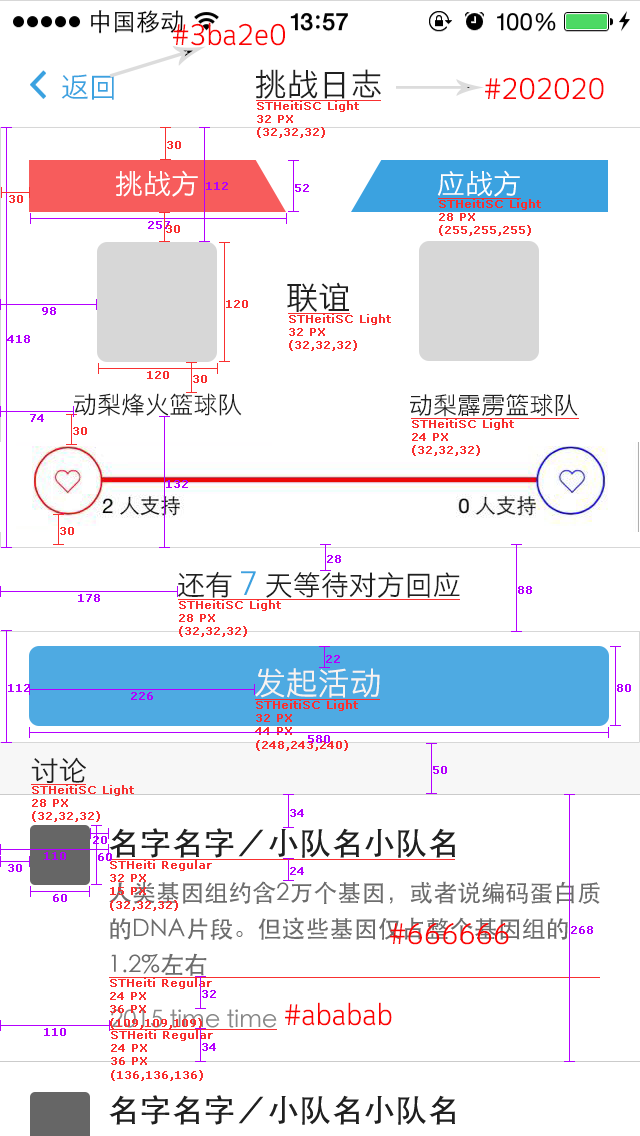
<style>
.page{position:relative;width:640px;height:1136px;background:#ffffff}
.page>*{position:absolute;margin:0}
.t1{font:28px "STHeitiSC-Light";color:#fb0404}
.t2{font:28px "STHeitiSC-Light";color:#3ba2e0}
.t3{font:32px "STHeitiSC-Light";color:#202020}
.t4{font:11px "Verdana";color:#f83030;font-weight:bold}
.t5{font:28px "STHeitiSC-Light";color:#ffffff}
.t6{font:11px "Verdana";color:#b400ff;font-weight:bold}
.t7{font:24px "STHeitiSC-Light";color:#202020}
.t8{font:28px "STHeitiSC-Light";color:#202020}
.t9{font:32px "STHeitiSC-Light";color:#3ba2e0}
.t10{font:32px "STHeitiSC-Light";color:#f8f3f0}
.t11{font:32px "STHeiti";color:#202020}
.t12{font:24px/36px "STHeiti";color:#6d6d6d}
.t13{font:24px "STHeiti";color:#888888}
</style>
<div class="page">
<p class="t1" style="left:173px;top:22px;width:112px;height:24px">#3ba2e0</p>
<p class="t2" style="left:61px;top:74px;width:53px;height:26px">返回</p>
<p class="t3" style="left:256px;top:69px;width:125px;height:30px">挑战日志</p>
<p class="t1" style="left:485px;top:77px;width:119px;height:23px">#202020</p>
<p class="t4" style="left:257px;top:101px;width:102px;height:37px">STHeitiSC Light<br>32 PX<br>(32,32,32)</p>
<p class="t4" style="left:167px;top:141px;width:14px;height:8px">30</p>
<p class="t5" style="left:116px;top:170px;width:82px;height:27px">挑战方</p>
<p class="t5" style="left:437px;top:170px;width:83px;height:27px">应战方</p>
<p class="t6" style="left:206px;top:182px;width:22px;height:8px">112</p>
<p class="t6" style="left:295px;top:184px;width:14px;height:8px">52</p>
<p class="t4" style="left:9px;top:195px;width:14px;height:8px">30</p>
<p class="t4" style="left:439px;top:199px;width:102px;height:37px">STHeitiSC Light<br>28 PX<br>(255,255,255)</p>
<p class="t6" style="left:148px;top:221px;width:22px;height:8px">257</p>
<p class="t4" style="left:166px;top:225px;width:14px;height:8px">30</p>
<p class="t3" style="left:287px;top:282px;width:62px;height:30px">联谊</p>
<p class="t4" style="left:226px;top:300px;width:22px;height:8px">120</p>
<p class="t6" style="left:42px;top:307px;width:14px;height:8px">98</p>
<p class="t4" style="left:289px;top:314px;width:102px;height:37px">STHeitiSC Light<br>32 PX<br>(32,32,32)</p>
<p class="t6" style="left:7px;top:335px;width:23px;height:8px">418</p>
<p class="t4" style="left:147px;top:371px;width:22px;height:8px">120</p>
<p class="t4" style="left:193px;top:375px;width:14px;height:8px">30</p>
<p class="t7" style="left:74px;top:393px;width:168px;height:23px">动梨烽火篮球队</p>
<p class="t7" style="left:410px;top:394px;width:168px;height:23px">动梨霹雳篮球队</p>
<p class="t6" style="left:30px;top:414px;width:14px;height:8px">74</p>
<p class="t4" style="left:412px;top:419px;width:102px;height:37px">STHeitiSC Light<br>24 PX<br>(32,32,32)</p>
<p class="t4" style="left:73px;top:427px;width:14px;height:8px">30</p>
<p class="t6" style="left:166px;top:480px;width:22px;height:8px">132</p>
<p class="t4" style="left:60px;top:527px;width:14px;height:8px">30</p>
<p class="t6" style="left:327px;top:555px;width:14px;height:8px">28</p>
<p class="t8" style="left:178px;top:571px;width:282px;height:27px">还有 <span class="t9">7 </span>天等待对方回应</p>
<p class="t6" style="left:518px;top:586px;width:14px;height:8px">88</p>
<p class="t6" style="left:78px;top:594px;width:22px;height:8px">178</p>
<p class="t4" style="left:179px;top:600px;width:102px;height:37px">STHeitiSC Light<br>28 PX<br>(32,32,32)</p>
<p class="t6" style="left:326px;top:655px;width:14px;height:8px">22</p>
<p class="t10" style="left:255px;top:668px;width:125px;height:30px">发起活动</p>
<p class="t6" style="left:8px;top:684px;width:22px;height:8px">112</p>
<p class="t6" style="left:617px;top:684px;width:14px;height:8px">80</p>
<p class="t6" style="left:131px;top:692px;width:22px;height:8px">226</p>
<p class="t4" style="left:255px;top:700px;width:103px;height:51px">STHeitiSC Light<br>32 PX<br>44 PX<br>(248,243,240)</p>
<p class="t6" style="left:308px;top:735px;width:22px;height:8px">580</p>
<p class="t8" style="left:31px;top:757px;width:55px;height:26px">讨论</p>
<p class="t6" style="left:433px;top:766px;width:14px;height:8px">50</p>
<p class="t4" style="left:32px;top:785px;width:102px;height:37px">STHeitiSC Light<br>28 PX<br>(32,32,32)</p>
<p class="t6" style="left:290px;top:809px;width:14px;height:8px">34</p>
<p class="t11" style="left:109px;top:828px;width:346px;height:30px">名字名字／小队名小队名</p>
<p class="t6" style="left:93px;top:836px;width:14px;height:8px">20</p>
<p class="t6" style="left:44px;top:852px;width:22px;height:8px">110</p>
<p class="t6" style="left:98px;top:853px;width:14px;height:8px">60</p>
<p class="t6" style="left:8px;top:864px;width:14px;height:8px">30</p>
<p class="t4" style="left:110px;top:860px;width:102px;height:51px">STHeiti Regular<br>32 PX<br>15 PX<br>(32,32,32)</p>
<p class="t6" style="left:290px;top:867px;width:14px;height:8px">24</p>
<p class="t12" style="left:109px;top:881px;width:491px;height:95px">人类基因组约含2万个基因，或者说编码蛋白质<br>的DNA片段。但这些基因仅占整个基因组的<br>1.2%左右</p>
<p class="t6" style="left:53px;top:894px;width:14px;height:8px">60</p>
<p class="t1" style="left:390px;top:923px;width:119px;height:22px">#666666</p>
<p class="t6" style="left:571px;top:926px;width:22px;height:8px">268</p>
<p class="t4" style="left:110px;top:978px;width:102px;height:51px">STHeiti Regular<br>24 PX<br>36 PX<br>(109,109,109)</p>
<p class="t6" style="left:202px;top:990px;width:14px;height:8px">32</p>
<p class="t13" style="left:110px;top:1009px;width:167px;height:19px">2015 time time</p>
<p class="t1" style="left:285px;top:1002px;width:107px;height:24px">#ababab</p>
<p class="t6" style="left:44px;top:1028px;width:22px;height:8px">110</p>
<p class="t4" style="left:111px;top:1030px;width:102px;height:51px">STHeiti Regular<br>24 PX<br>36 PX<br>(136,136,136)</p>
<p class="t6" style="left:202px;top:1043px;width:14px;height:8px">34</p>
<p class="t11" style="left:109px;top:1095px;width:346px;height:30px">名字名字／小队名小队名</p>
</div>
